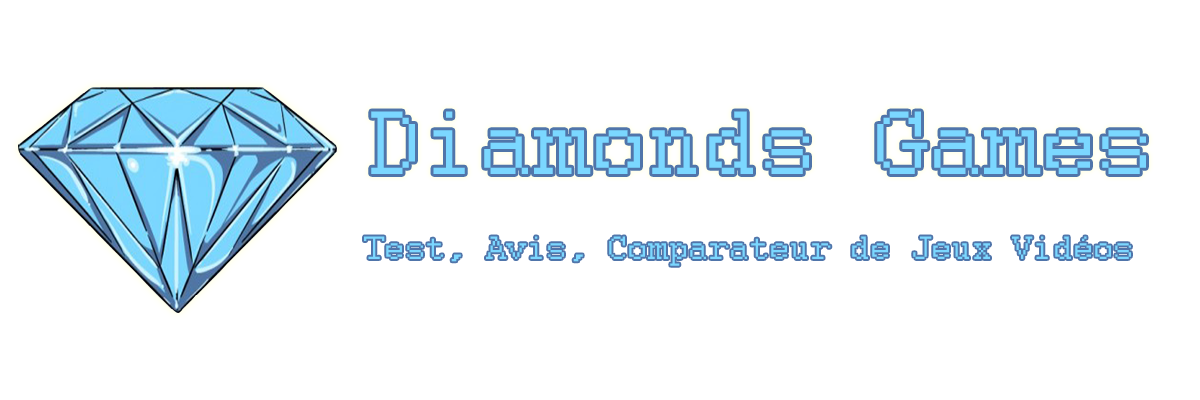
<style>
.page{position:relative;width:1200px;height:400px;background:#ffffff}
.page>*{position:absolute;margin:0}
.t1{font:100px "Courier";color:#7bd7ff}
.t2{font:100px "Courier";color:#5075aa}
.t3{font:36px "Courier";color:#7bd7ff}
</style>
<div class="page">
<p class="t1" style="left:371px;top:111px;width:775px;height:63px">Diamonds <span class="t2">Games</span></p>
<p class="t3" style="left:364px;top:236px;width:767px;height:30px">Test, Avis, Comparateur de Jeux Vidéos</p>
</div>
